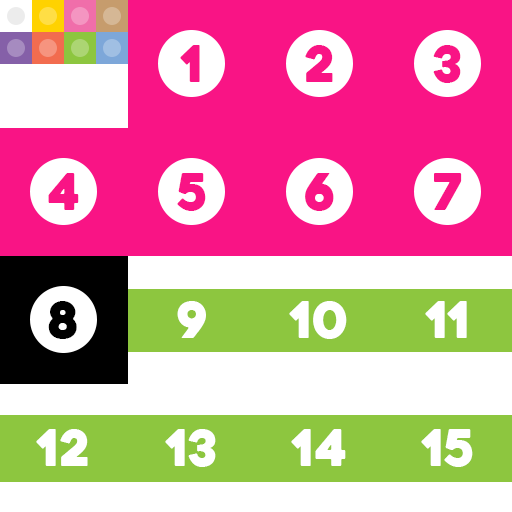
<style>
.page{position:relative;width:512px;height:512px;background:#ffffff}
.page>*{position:absolute;margin:0}
.t1{font:50px "Heavitas";color:#f91485}
.t2{font:50px "Heavitas";color:#000000}
.t3{font:50px "Heavitas";color:#ffffff}
</style>
<div class="page">
<p class="t1" style="left:180px;top:45px;width:20px;height:37px">1</p>
<p class="t1" style="left:305px;top:45px;width:28px;height:37px">2</p>
<p class="t1" style="left:433px;top:45px;width:28px;height:38px">3</p>
<p class="t1" style="left:48px;top:173px;width:31px;height:37px">4</p>
<p class="t1" style="left:177px;top:173px;width:29px;height:38px">5</p>
<p class="t1" style="left:305px;top:173px;width:29px;height:38px">6</p>
<p class="t1" style="left:434px;top:173px;width:28px;height:37px">7</p>
<p class="t2" style="left:48px;top:301px;width:29px;height:38px">8</p>
<p class="t3" style="left:177px;top:301px;width:29px;height:37px">9</p>
<p class="t3" style="left:289px;top:301px;width:58px;height:38px">10</p>
<p class="t3" style="left:425px;top:301px;width:42px;height:37px">11</p>
<p class="t3" style="left:36px;top:429px;width:52px;height:37px">12</p>
<p class="t3" style="left:165px;top:429px;width:51px;height:38px">13</p>
<p class="t3" style="left:291px;top:429px;width:55px;height:37px">14</p>
<p class="t3" style="left:421px;top:429px;width:52px;height:38px">15</p>
</div>
